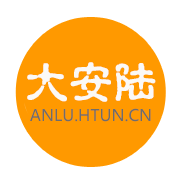
<style>
.page{position:relative;width:185px;height:185px;background:#ffffff}
.page>*{position:absolute;margin:0}
.t1{font:42.7px "-binsforever-";color:#fbf9f6;font-weight:bold}
.t2{font:16px "MicrosoftYaHei";color:#6f6d6c}
</style>
<div class="page">
<p class="t1" style="left:27px;top:62px;width:129px;height:40px">大安陆</p>
<p class="t2" style="left:30px;top:108px;width:121px;height:14px">ANLU.HTUN.CN</p>
</div>
